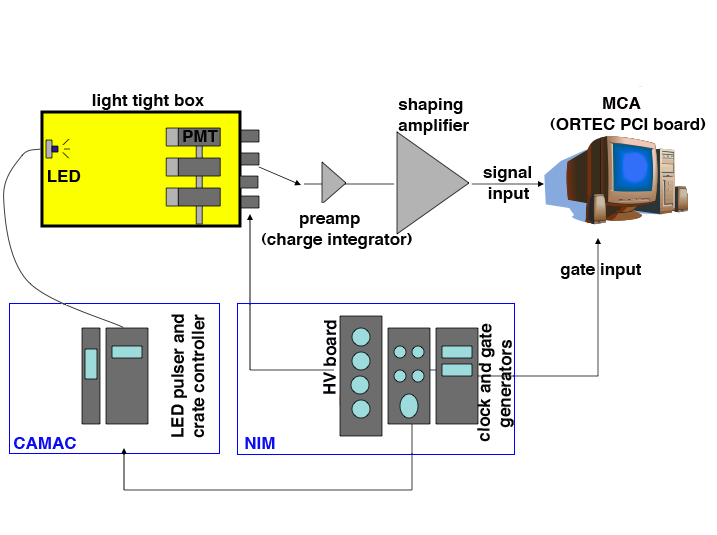
<style>
.page{position:relative;width:717px;height:535px;background:#ffffff}
.page>*{position:absolute;margin:0}
.t1{font:17px "Helvetica-Bold";color:#050404}
.t2{font:17px "Helvetica-Bold";color:#050000}
.t3{font:17px "Helvetica-Bold";color:#010108}
.t4{font:17px "Helvetica-Bold";color:#0c0df5}
.t5{font:17px "Helvetica-Bold";color:#0c0cf5}
</style>
<div class="page">
<p class="t1" style="left:92px;top:94px;width:112px;height:16px">light tight box</p>
<p class="t1" style="left:398px;top:98px;width:71px;height:37px">shaping <br>amplifier</p>
<p class="t2" style="left:550px;top:97px;width:156px;height:33px">MCA<br>(ORTEC PCI board)</p>
<p class="t1" style="left:183px;top:130px;width:35px;height:12px">PMT</p>
<p class="t1" style="left:48px;top:170px;width:33px;height:12px">LED</p>
<p class="t1" style="left:483px;top:166px;width:48px;height:37px">signal<br> input</p>
<p class="t1" style="left:262px;top:215px;width:150px;height:34px">preamp<br>(charge integrator)</p>
<p class="t1" style="left:560px;top:263px;width:81px;height:16px">gate input</p>
<p class="t1" style="left:171px;top:314px;width:34px;height:124px;rotate:-90deg">LED pulser and<br>crate controller</p>
<p class="t3" style="left:323px;top:320px;width:14px;height:74px;rotate:-89deg">HV board</p>
<p class="t1" style="left:477px;top:323px;width:37px;height:119px;rotate:-89deg">clock and gate <br>   generators</p>
<p class="t4" style="left:14px;top:437px;width:62px;height:12px">CAMAC</p>
<p class="t5" style="left:245px;top:437px;width:30px;height:12px">NIM</p>
</div>
